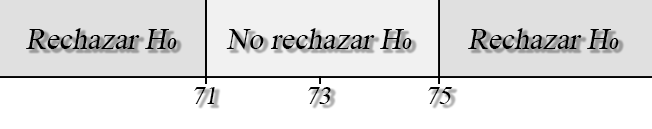
<style>
.page{position:relative;width:652px;height:129px;background:#ffffff}
.page>*{position:absolute;margin:0}
.t1{font:22.5px "TimesNewRomanPSMT";color:#000000;font-style:italic}
.t2{font:19.8px "TimesNewRomanPSMT";color:#000000;font-style:italic}
</style>
<div class="page">
<p class="t1" style="left:26px;top:28px;width:151px;height:21px">Rechazar H₀</p>
<p class="t1" style="left:226px;top:28px;width:186px;height:22px">No rechazar H₀</p>
<p class="t1" style="left:468px;top:28px;width:151px;height:21px">Rechazar H₀</p>
<p class="t2" style="left:194px;top:87px;width:21px;height:17px">71</p>
<p class="t2" style="left:308px;top:87px;width:23px;height:17px">73</p>
<p class="t2" style="left:428px;top:87px;width:25px;height:17px">75</p>
</div>
